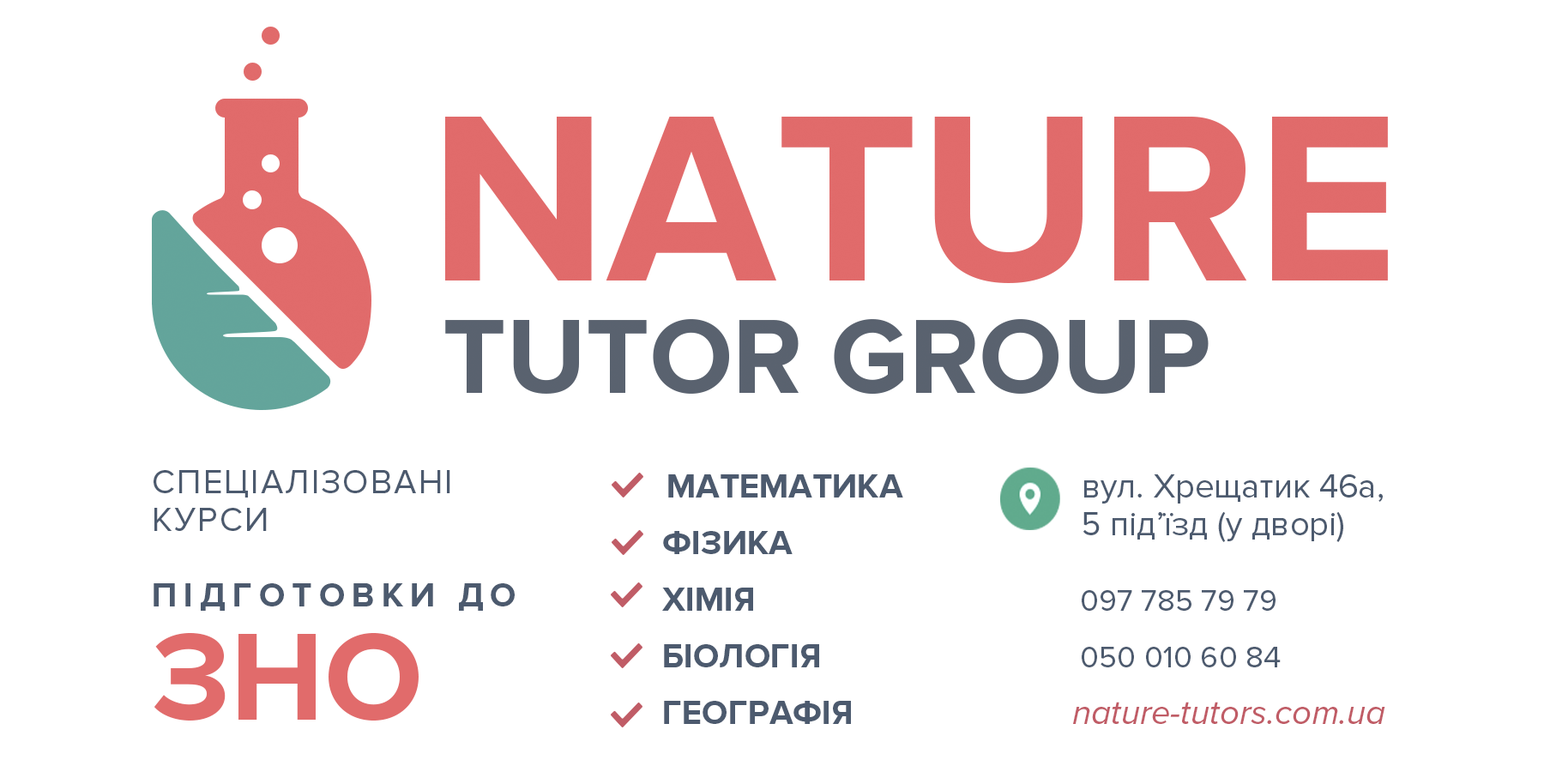
<style>
.page{position:relative;width:1544px;height:772px;background:#ffffff}
.page>*{position:absolute;margin:0}
.t1{font:34.3px/18.9px "ProximaNova-Regular";letter-spacing:0.05em;color:#4c5a6e}
.t2{font:30px/18.9px "ProximaNova-Regular";letter-spacing:0.05em;color:#4c5a6e}
.t3{font:34.3px/18.9px "ProximaNova-Bold";letter-spacing:0.2em;color:#4c5a6e}
.t4{font:128.6px/18.9px "ProximaNova-Bold";color:#e16b6b}
.t5{font:34.3px/18.9px "ProximaNova-Bold";color:#4c5a6e}
.t6{font:38.3px/18.9px "ProximaNova-Regular";color:#4c5a6e}
.t7{font:34.3px/18.9px "ProximaNova-Regular";color:#4c5a6e}
.t8{font:30.9px/18.9px "ProximaNova-Regular";color:#4c5a6e}
.t9{font:34.3px/18.9px "ProximaNova-RegularIt";color:#c05c66}
</style>
<div class="page">
<p class="t1" style="left:154px;top:470px;width:361px;height:251px;text-align:center"><span class="t2"><br></span>СПЕЦІАЛІЗОВАНІ <br><br>КУРСИ<br><br><span class="t3"><br><br>ПІДГОТОВКИ ДО <br><br><br><br><br><br></span><span class="t4">ЗНО</span></p>
<p class="t5" style="left:662px;top:474px;width:241px;height:250px"><span class="t6">    </span>МАТЕМАТИКА<br>  <br><br>    ФІЗИКА<br><br><br>    ХІМІЯ<br><br><br>    БІОЛОГІЯ <br><br><br>    ГЕОГРАФІЯ</p>
<p class="t7" style="left:1073px;top:474px;width:313px;height:250px"><span class="t6">         </span>вул. Хрещатик 46а,<br>   <br>          5 під’їзд (у дворі)<br> <br><br><br><span class="t8">           097 785 79 79<br><br><br>           050 010 60 84<br>   <br><br>         </span><span class="t9">nature-tutors.com.ua</span></p>
</div>
